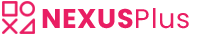
<style>
.page{position:relative;width:222px;height:35px;background:#ffffff}
.page>*{position:absolute;margin:0}
.t1{font:27px "Poppins-Bold";letter-spacing:0.025em;color:#e91e63}
.t2{font:27px "Poppins-Regular";letter-spacing:0.025em;color:#e91e63}
</style>
<div class="page">
<p class="t1" style="left:42px;top:8px;width:147px;height:21px">NEXUS<span class="t2">Plus</span></p>
</div>
